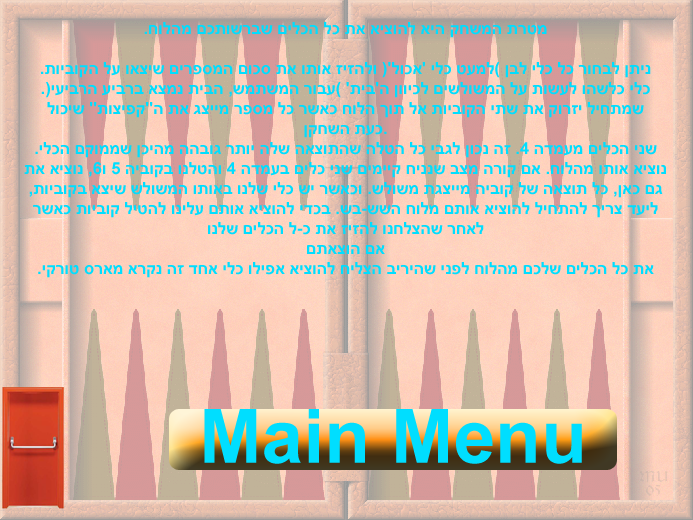
<style>
.page{position:relative;width:693px;height:520px}
.page>*{position:absolute;margin:0}
.t1{font:16.7px "Arial-BoldMT";color:#00deff}
.t2{font:75px "Arial-BoldMT";color:#00deff}
</style>
<div class="page">
<p class="t1" style="left:24px;top:22px;width:642px;height:256px;text-align:center">.חולהמ םכתושרבש םילכה לכ תא איצוהל איה קחשמה תרטמ<br><br>.תויבוקה לע ואציש םירפסמה םוכס תא ותוא זיזהלו )'לוכא' ילכ טעמל( ןבל ילכ לכ רוחבל ןתינ .)יעיברה עיברב אצמנ תיבה ,שמתשמה רובע( 'תיב'ה ןוויכל םישלושמה לע תושעל והשלכ ילכ לוכיש "תוציפק"ה תא גציימ רפסמ לכ רשאכ חולה ךות לא תויבוקה יתש תא קורזי ליחתמש ןקחשה תעכ.<br>.ילכה םקוממש ןכיהמ ההבוג רתוי הלש האצותהש הלטה לכ יבגל ןוכנ הז .4 הדמעמ םילכה ינש תא איצונ ,6ו 5 היבוקב ונלטהו 4 הדמעב םילכ ינש םימייק חיננש בצמ הרוק םא .חולהמ ותוא איצונ ,תויבוקב אציש שלושמה ותואב ונלש ילכ שי רשאכו .שלושמ תגציימ היבוק לש האצות לכ ,ןאכ םג רשאכ תויבוק ליטהל ונילע םתוא איצוהל ידכב .שב-ששה חולמ םתוא איצוהל ליחתהל ךירצ דעיל ונלש םילכה ל-כ תא זיזהל ונחלצהש רחאל<br>םתאצוה םא <br>.יקרוט סראמ ארקנ הז דחא ילכ וליפא איצוהל חילצה ביריהש ינפל חולהמ םכלש םילכה לכ תא</p>
<p class="t2" style="left:204px;top:409px;width:378px;height:55px">Main Menu</p>
</div>
